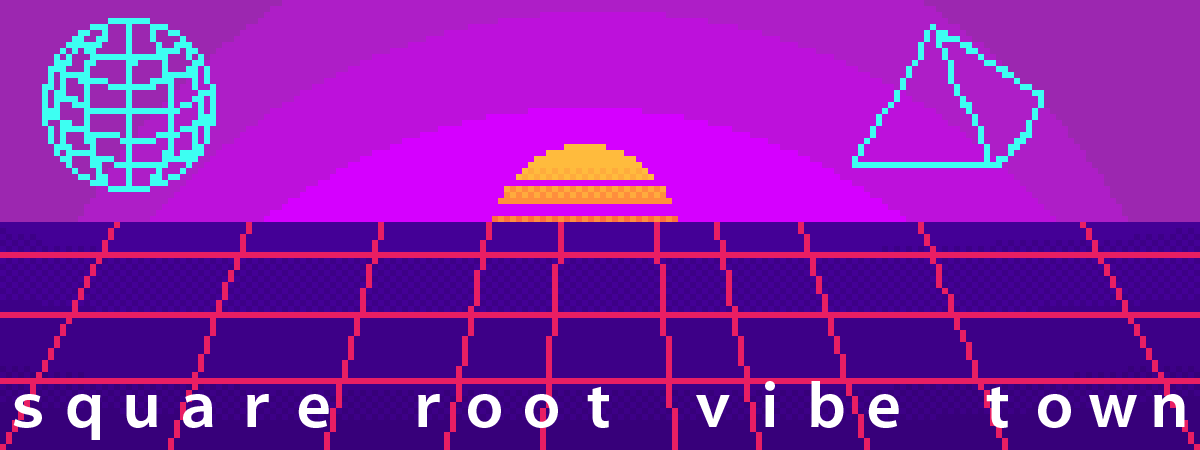
<style>
.page{position:relative;width:1200px;height:450px;background:#3d0087}
.page>*{position:absolute;margin:0}
.t1{font:57.1px "KozGoPr6N-Bold";color:#ffffff}
</style>
<div class="page">
<p class="t1" style="left:13px;top:381px;width:1172px;height:59px">ｓｑｕａｒｅ　ｒｏｏｔ　ｖｉｂｅ　ｔｏｗｎ</p>
</div>
